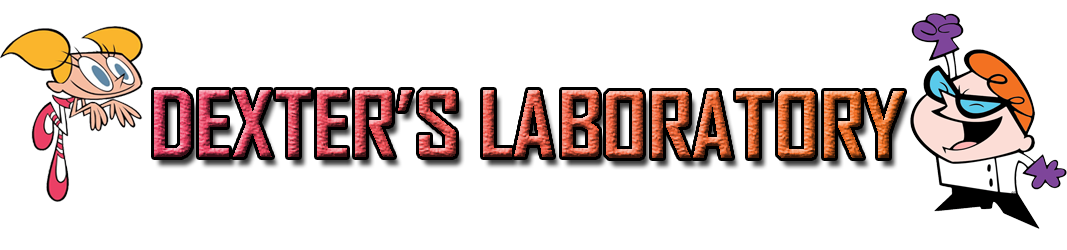
<style>
.page{position:relative;width:1067px;height:250px;background:#ffffff}
.page>*{position:absolute;margin:0}
.t1{font:87.8px "AgencyFB-Bold";scale:1.1 1}
</style>
<div class="page">
<p class="t1" style="left:154px;top:90px;width:750px;height:68px">DEXTER’S LABORATORY</p>
</div>
